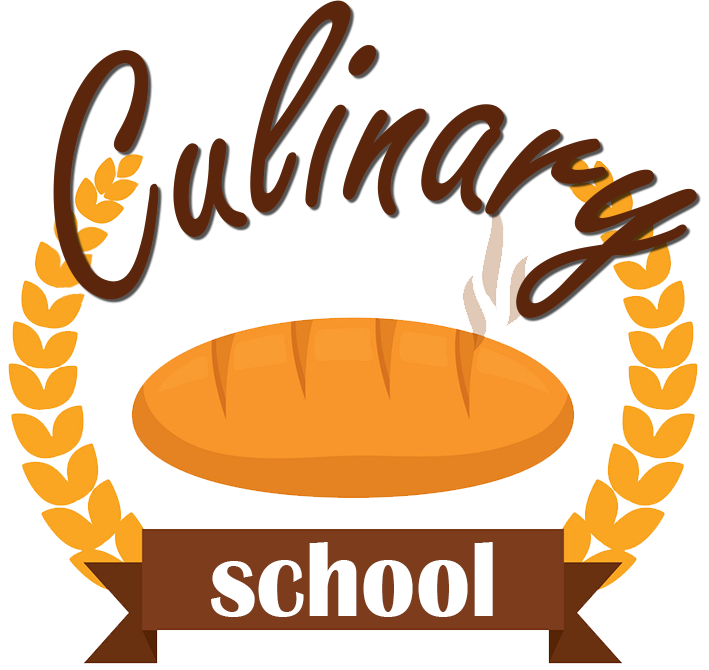
<style>
.page{position:relative;width:709px;height:670px;background:#ffffff}
.page>*{position:absolute;margin:0}
.t1{font:320px "FreestyleScript-Regular";color:#5b260c;scale:0.62 1}
.t2{font:110px "BritannicBold";color:#ffffff;scale:0.91 1}
</style>
<div class="page">
<p class="t1" style="left:53px;top:0px;width:644px;height:318px;rotate:-2deg">Culinary</p>
<p class="t2" style="left:211px;top:542px;width:282px;height:75px">school</p>
</div>
